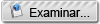
<style>
.page{position:relative;width:100px;height:24px}
.page>*{position:absolute;margin:0}
.t1{font:12px "ArialMT";color:#000000}
</style>
<div class="page">
<p class="t1" style="left:30px;top:8px;width:60px;height:9px">Examinar...</p>
</div>
